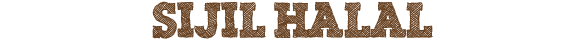
<style>
.page{position:relative;width:585px;height:40px;background:#ffffff}
.page>*{position:absolute;margin:0}
.t1{font:48px "ScribbleBoxDEMO";color:#684121}
</style>
<div class="page">
<p class="t1" style="left:152px;top:1px;width:281px;height:38px">Sijil Halal</p>
</div>
